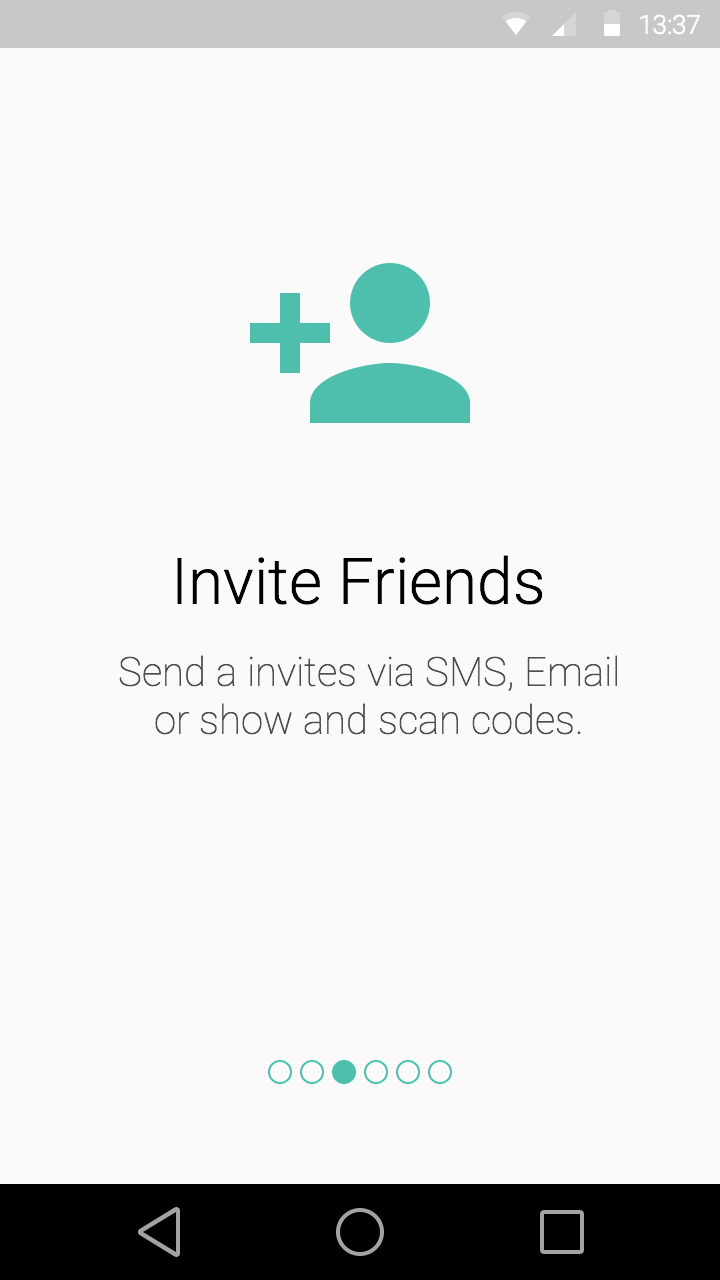
<style>
.page{position:relative;width:720px;height:1280px;background:#fafafa}
.page>*{position:absolute;margin:0}
.t1{font:26.1px "Roboto-Light";color:#ffffff}
.t2{font:64px "Roboto-Light";color:#000000}
.t3{font:40px/48px "Roboto-Thin";color:#4d4d4d}
</style>
<div class="page">
<p class="t1" style="left:640px;top:14px;width:60px;height:21px">13:37</p>
<p class="t2" style="left:177px;top:555px;width:366px;height:50px">Invite Friends</p>
<p class="t3" style="left:119px;top:655px;width:498px;height:80px;text-align:center">Send a invites via SMS, Email<br>or show and scan codes.</p>
</div>
